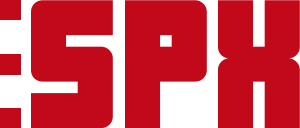
<style>
.page{position:relative;width:300px;height:128px;background:#c2091a}
.page>*{position:absolute;margin:0}
.t1{font:185.8px "Hoyts";color:#c2091a}
</style>
<div class="page">
<p class="t1" style="left:31px;top:0px;width:269px;height:128px">SPX</p>
</div>
